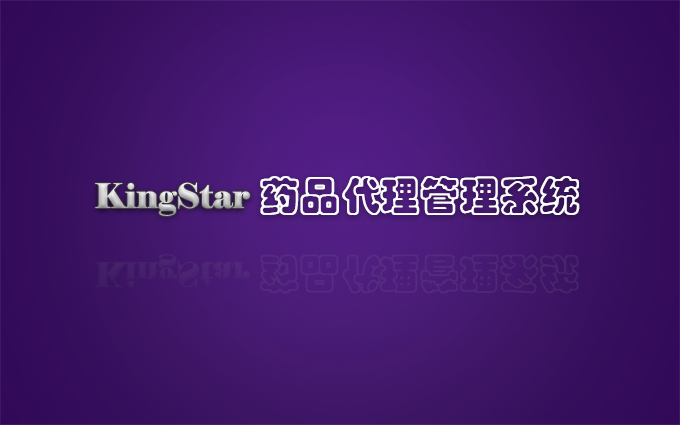
<style>
.page{position:relative;width:680px;height:425px}
.page>*{position:absolute;margin:0}
.t1{font:33.7px "Elephant-Regular"}
.t2{font:40.5px "STCaiyun";color:#fefefe}
.t3{font:33.7px "Elephant-Regular";color:#472270}
.t4{font:40.5px "STCaiyun";color:#542b7f}
</style>
<div class="page">
<p class="t1" style="left:95px;top:182px;width:155px;height:34px">KingStar</p>
<p class="t2" style="left:260px;top:176px;width:319px;height:39px">药品代理管理系统</p>
<p class="t2" style="left:261px;top:176px;width:319px;height:39px">药品代理管理系统</p>
<p class="t3" style="left:95px;top:254px;width:155px;height:34px">KingStar</p>
<p class="t4" style="left:260px;top:254px;width:319px;height:40px">药品代理管理系统</p>
</div>
